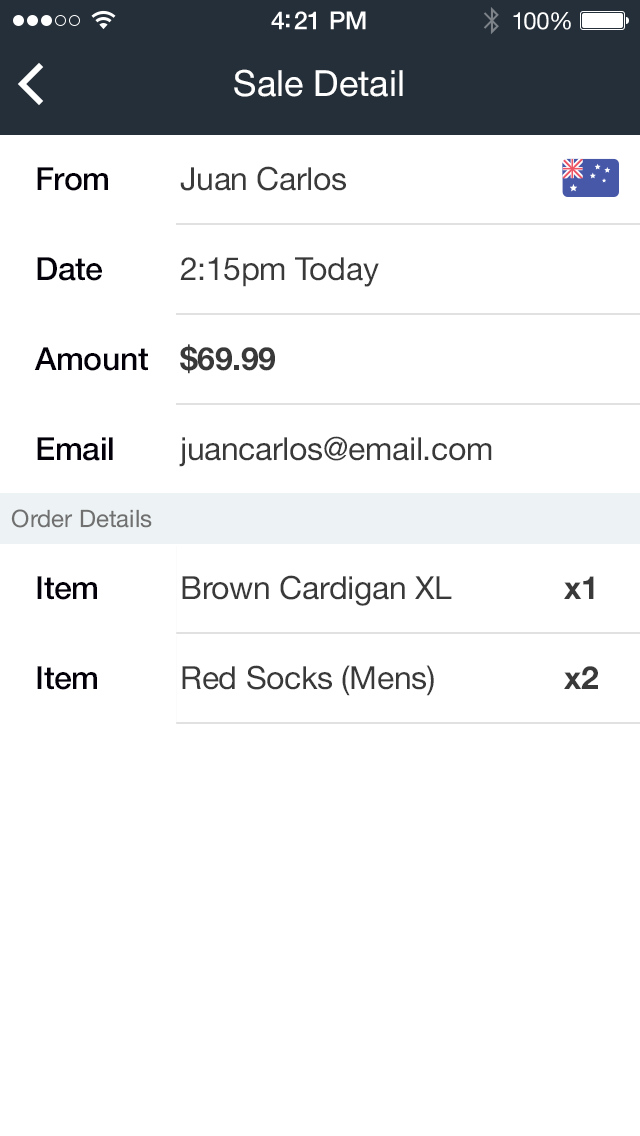
<style>
.page{position:relative;width:640px;height:1136px;background:#ffffff}
.page>*{position:absolute;margin:0}
.t1{font:25px "HelveticaNeue-Medium";letter-spacing:-0.02em;color:#ffffff}
.t2{font:24px "HelveticaNeue";letter-spacing:-0.02em;color:#ffffff}
.t3{font:36px "HelveticaNeue";color:#ffffff}
.t4{font:32px "HelveticaNeue-Medium";letter-spacing:-0.01em;color:#04000a}
.t5{font:32px "HelveticaNeue";letter-spacing:-0.01em;color:#393939}
.t6{font:32px "HelveticaNeue-Bold";letter-spacing:-0.01em;color:#393939}
.t7{font:24px "HelveticaNeue";color:#707070}
</style>
<div class="page">
<p class="t1" style="left:271px;top:11px;width:95px;height:19px">4:21 PM</p>
<p class="t2" style="left:513px;top:11px;width:58px;height:19px">100%</p>
<p class="t3" style="left:234px;top:69px;width:169px;height:28px">Sale Detail</p>
<p class="t4" style="left:37px;top:167px;width:71px;height:24px">From</p>
<p class="t5" style="left:180px;top:166px;width:166px;height:25px">Juan Carlos</p>
<p class="t4" style="left:37px;top:257px;width:65px;height:24px">Date</p>
<p class="t5" style="left:180px;top:257px;width:199px;height:30px">2:15pm Today</p>
<p class="t4" style="left:34px;top:347px;width:114px;height:24px">Amount</p>
<p class="t6" style="left:180px;top:344px;width:95px;height:30px">$69.99</p>
<p class="t4" style="left:37px;top:437px;width:76px;height:24px">Email</p>
<p class="t5" style="left:179px;top:436px;width:313px;height:31px">juancarlos@email.com</p>
<p class="t7" style="left:11px;top:509px;width:141px;height:19px">Order Details</p>
<p class="t4" style="left:37px;top:576px;width:60px;height:24px">Item</p>
<p class="t5" style="left:182px;top:575px;width:270px;height:31px">Brown Cardigan XL</p>
<p class="t6" style="left:564px;top:576px;width:30px;height:23px">x1</p>
<p class="t5" style="left:182px;top:665px;width:252px;height:31px">Red Socks (Mens)</p>
<p class="t4" style="left:37px;top:666px;width:60px;height:24px">Item</p>
<p class="t6" style="left:564px;top:666px;width:34px;height:23px">x2</p>
</div>
